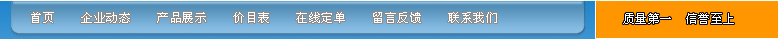
<style>
.page{position:relative;width:778px;height:39px}
.page>*{position:absolute;margin:0}
.t1{font:12px "SimSun";letter-spacing:0.04em;color:#fdfdfd}
</style>
<div class="page">
<p class="t1" style="left:31px;top:12px;width:466px;height:11px">首页    企业动态    产品展示    价目表    在线定单    留言反馈    联系我们</p>
</div>
